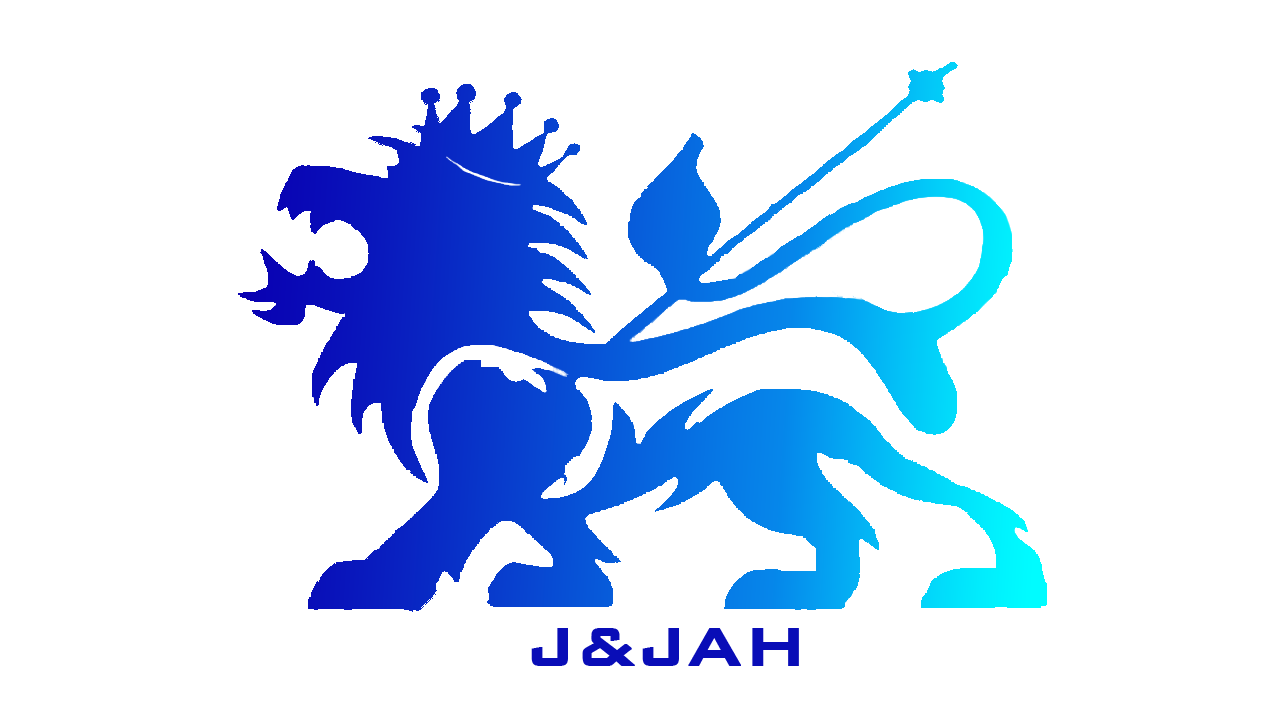
<style>
.page{position:relative;width:1280px;height:720px;background:#ffffff}
.page>*{position:absolute;margin:0}
.t1{font:72px "BankGothicBT-Medium";color:#090db7;font-weight:bold}
</style>
<div class="page">
<p class="t1" style="left:531px;top:628px;width:268px;height:38px">J&amp;JAH</p>
</div>
